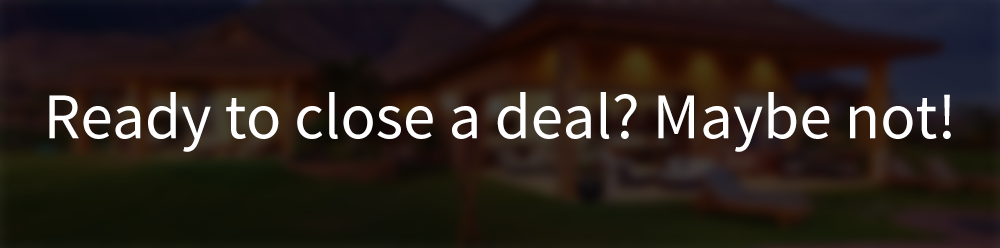
<style>
.page{position:relative;width:1000px;height:248px}
.page>*{position:absolute;margin:0}
.t1{font:65px "SourceSansPro-Regular";color:#ffffff}
</style>
<div class="page">
<p class="t1" style="left:49px;top:92px;width:902px;height:60px">Ready to close a deal? Maybe not!</p>
</div>
